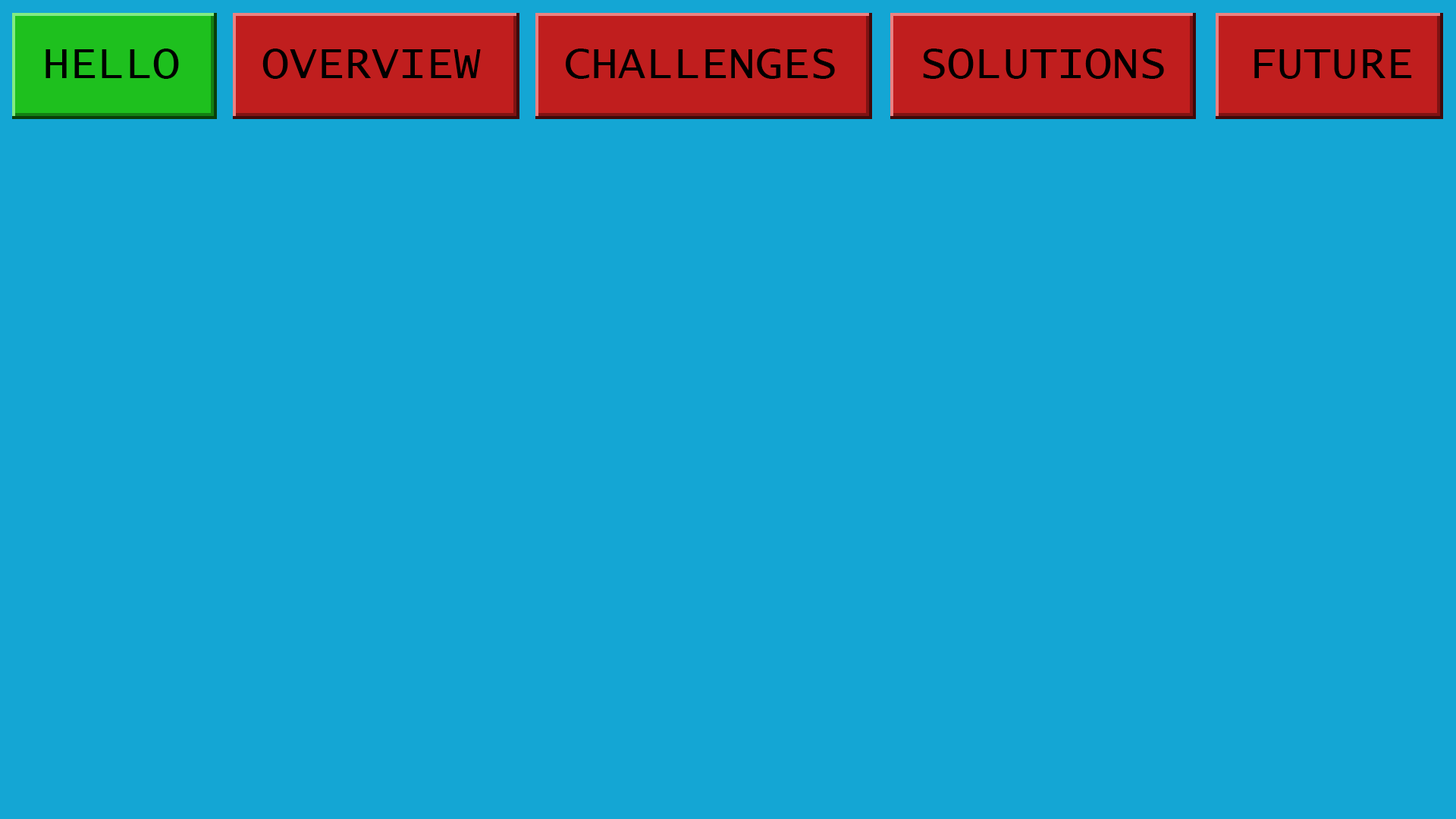
<style>
.page{position:relative;width:1456px;height:819px;background:#14a6d4}
.page>*{position:absolute;margin:0}
.t1{font:45.5px "LucidaConsole";color:#000000}
</style>
<div class="page">
<p class="t1" style="left:45px;top:49px;width:1367px;height:30px">HELLO   OVERVIEW   CHALLENGES   SOLUTIONS   FUTURE</p>
</div>
